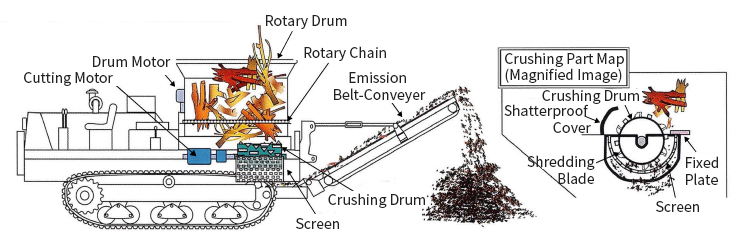
<style>
.page{position:relative;width:741px;height:244px;background:#ffffff}
.page>*{position:absolute;margin:0}
.t1{font:14px "NotoSansCJKkr-Regular";color:#212121}
</style>
<div class="page">
<p class="t1" style="left:266px;top:15px;width:81px;height:14px">Rotary Drum</p>
<p class="t1" style="left:304px;top:46px;width:82px;height:15px">Rotary Chain</p>
<p class="t1" style="left:505px;top:52px;width:119px;height:31px">Crushing Part Map<br>(Magnified Image)</p>
<p class="t1" style="left:93px;top:56px;width:78px;height:11px">Drum Motor</p>
<p class="t1" style="left:24px;top:72px;width:89px;height:14px">Cutting Motor</p>
<p class="t1" style="left:334px;top:72px;width:92px;height:31px;text-align:center">Emission <br>Belt-Conveyer</p>
<p class="t1" style="left:542px;top:89px;width:97px;height:15px">Crushing Drum</p>
<p class="t1" style="left:504px;top:104px;width:87px;height:29px;text-align:right">Shatterproof <br>Cover</p>
<p class="t1" style="left:527px;top:155px;width:68px;height:29px;text-align:right">Shredding<br>Blade</p>
<p class="t1" style="left:686px;top:156px;width:32px;height:29px">Fixed<br>Plate</p>
<p class="t1" style="left:328px;top:193px;width:97px;height:15px">Crushing Drum</p>
<p class="t1" style="left:656px;top:201px;width:43px;height:11px">Screen</p>
<p class="t1" style="left:296px;top:218px;width:43px;height:11px">Screen</p>
</div>
